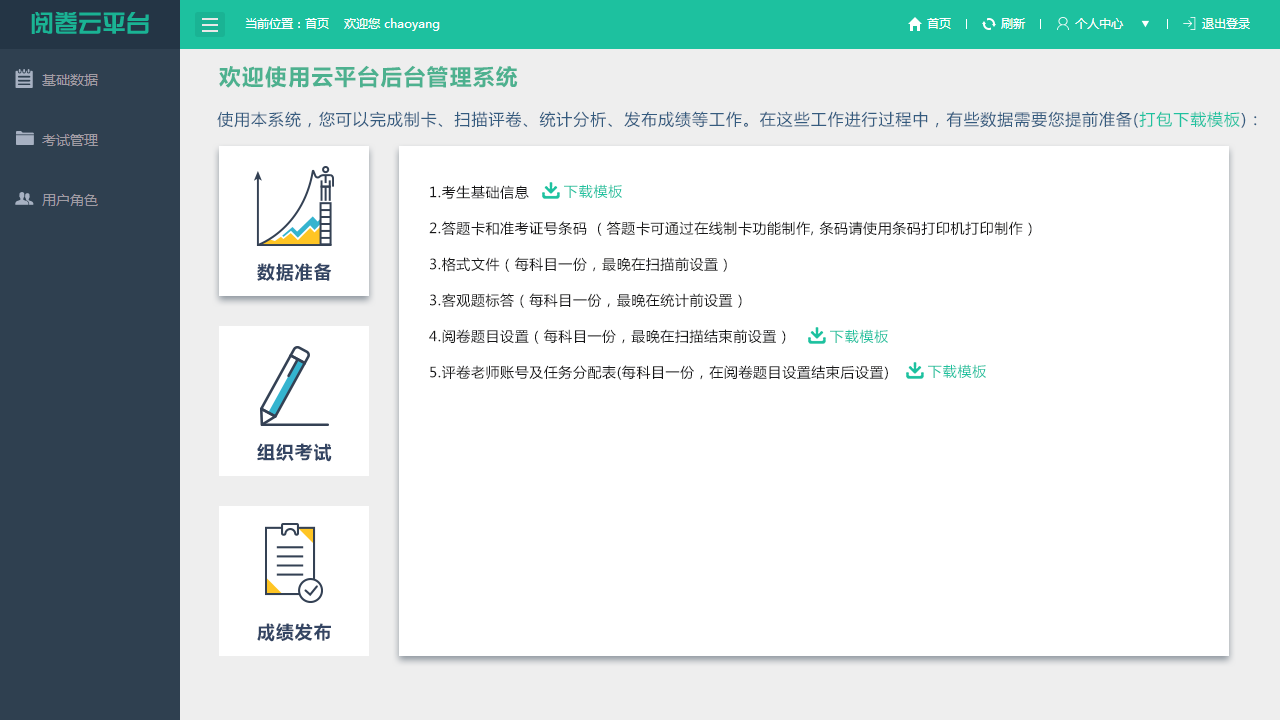
<style>
.page{position:relative;width:1280px;height:720px;background:#ffffff}
.page>*{position:absolute;margin:0}
.t1{font:22px "MicrosoftYaHei-Bold";letter-spacing:0.06em;color:#4db18f;text-transform:uppercase}
.t2{font:16px "MicrosoftYaHei";letter-spacing:0.06em;color:#345b7f;text-transform:uppercase}
.t3{font:16px "MicrosoftYaHei";letter-spacing:0.06em;color:#1dc19f;text-transform:uppercase}
.t4{font:14px/36px "MicrosoftYaHei";letter-spacing:0.04em;color:#161617;text-transform:uppercase}
.t5{font:14px "MicrosoftYaHei";letter-spacing:0.06em;color:#1dc19f;text-transform:uppercase}
.t6{font:18px "MicrosoftYaHei-Bold";letter-spacing:0.06em;color:#344563;text-transform:uppercase}
</style>
<div class="page">
<p class="t1" style="left:219px;top:65px;width:299px;height:23px">欢迎使用云平台后台管理系统</p>
<p class="t2" style="left:217px;top:111px;width:1040px;height:17px">使用本系统，您可以完成制卡、扫描评卷、统计分析、发布成绩等工作。在这些工作进行过程中，有些数据需要您提前准备(<span class="t3">打包下载模板</span>)：</p>
<p class="t4" style="left:429px;top:185px;width:603px;height:195px">1.考生基础信息 <br>2.答题卡和准考证号条码 （答题卡可通过在线制卡功能制作, 条码请使用条码打印机打印制作） <br>3.格式文件（每科目一份，最晚在扫描前设置） <br>3.客观题标答（每科目一份，最晚在统计前设置）<br>4.阅卷题目设置（每科目一份，最晚在扫描结束前设置） <br>5.评卷老师账号及任务分配表(每科目一份，在阅卷题目设置结束后设置)</p>
<p class="t5" style="left:564px;top:184px;width:58px;height:14px">下载模板</p>
<p class="t6" style="left:257px;top:263px;width:75px;height:18px">数据准备</p>
<p class="t5" style="left:830px;top:329px;width:58px;height:14px">下载模板</p>
<p class="t5" style="left:928px;top:364px;width:58px;height:14px">下载模板</p>
<p class="t6" style="left:257px;top:443px;width:75px;height:19px">组织考试</p>
<p class="t6" style="left:257px;top:623px;width:74px;height:19px">成绩发布</p>
</div>
